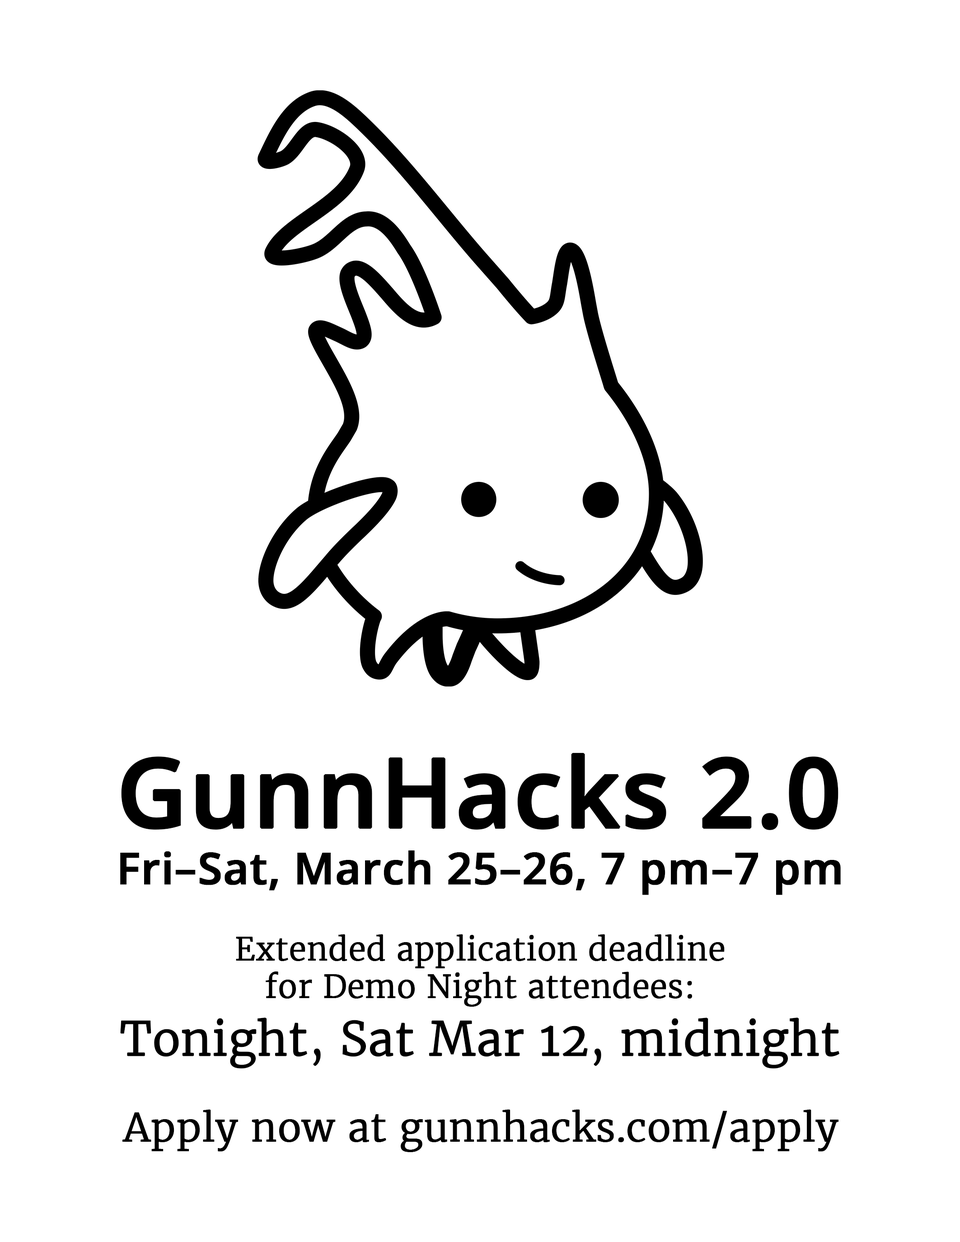
<style>
.page{position:relative;width:960px;height:1242px;background:#ffffff}
.page>*{position:absolute;margin:0}
.t1{font:96.3px "OpenSans-Semibold";color:#000000;font-weight:bold}
.t2{font:43.9px "OpenSans-Semibold";color:#000000;font-weight:bold}
.t3{font:31.4px "Merriweather-Light";color:#000000;font-weight:bold}
.t4{font:46.1px "Merriweather-Light";color:#000000;font-weight:bold}
.t5{font:38.9px "Merriweather-Light";color:#000000;font-weight:bold}
</style>
<div class="page">
<p class="t1" style="left:121px;top:753px;width:717px;height:77px">GunnHacks 2.0</p>
<p class="t2" style="left:120px;top:851px;width:721px;height:44px">Fri–Sat, March 25–26, 7 pm–7 pm</p>
<p class="t3" style="left:236px;top:934px;width:489px;height:73px;text-align:center">Extended application deadline<br>for Demo Night attendees:</p>
<p class="t4" style="left:120px;top:1018px;width:720px;height:51px">Tonight, Sat Mar 12, midnight</p>
<p class="t5" style="left:122px;top:1109px;width:716px;height:43px">Apply now at gunnhacks.com/apply</p>
</div>
